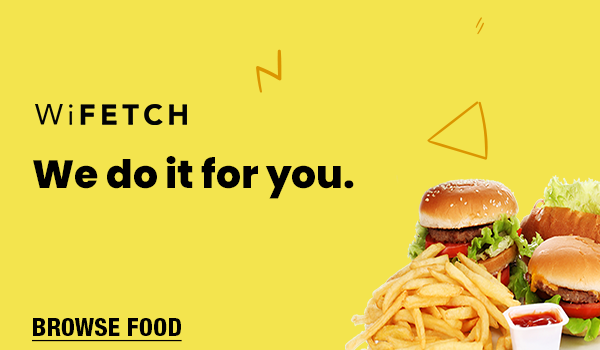
<style>
.page{position:relative;width:600px;height:350px;background:#f3e44e}
.page>*{position:absolute;margin:0}
.t1{font:39.2px "Poppins-ExtraBold";color:#000000}
.t2{font:25px "HelveticaNeueLTStd-HvCn";color:#000000;text-decoration:underline}
</style>
<div class="page">
<p class="t1" style="left:33px;top:156px;width:321px;height:43px">We do it for you.</p>
<p class="t2" style="left:32px;top:318px;width:150px;height:24px">BROWSE FOOD</p>
</div>
